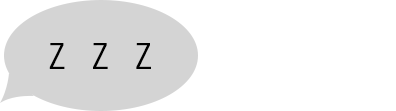
<style>
.page{position:relative;width:396px;height:111px;background:#ffffff}
.page>*{position:absolute;margin:0}
.t1{font:36px "LetterGothicStd-Bold";color:#000000}
</style>
<div class="page">
<p class="t1" style="left:49px;top:43px;width:102px;height:26px">Z Z Z</p>
</div>
